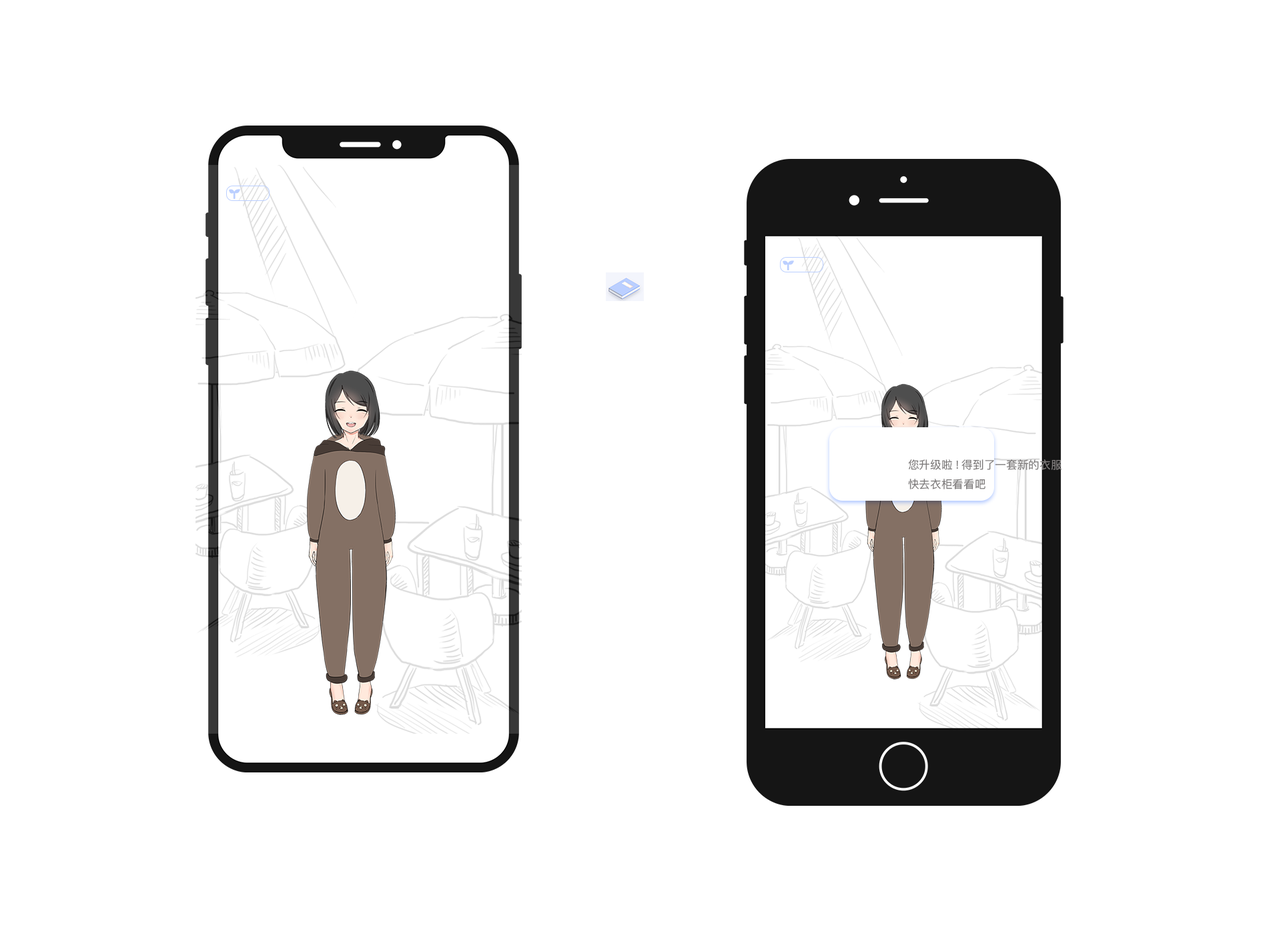
<style>
.page{position:relative;width:1261px;height:946px;background:#ffffff}
.page>*{position:absolute;margin:0}
.t1{font:11.1px "PingFangSC-Regular";color:#7e7b7b}
</style>
<div class="page">
<p class="t1" style="left:908px;top:459px;width:154px;height:30px">您升级啦!得到了一套新的衣服<br>快去衣柜看看吧</p>
</div>
